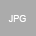
<style>
.page{position:relative;width:36px;height:36px;background:#ababab}
.page>*{position:absolute;margin:0}
.t1{font:9px "ArialMT";color:#ffffff}
</style>
<div class="page">
<p class="t1" style="left:8px;top:15px;width:18px;height:7px">JPG</p>
</div>
